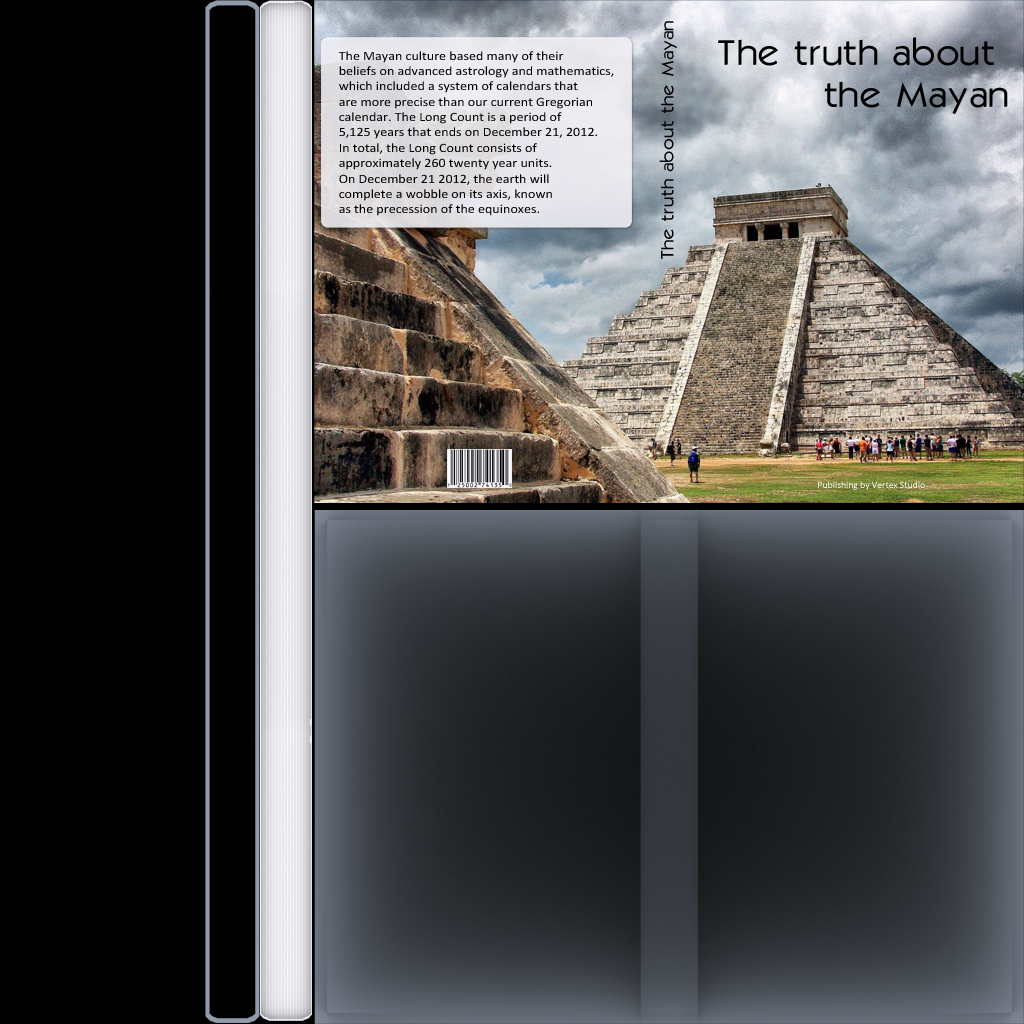
<style>
.page{position:relative;width:1024px;height:1024px;background:#000000}
.page>*{position:absolute;margin:0}
.t1{font:17.7px "Kabel";color:#000000;scale:1.07 1}
.t2{font:35.3px "Kabel";color:#000000;scale:1.07 1}
.t3{font:12.8px "Calibri";color:#000000;scale:1.1 1}
.t4{font:9.7px "Calibri";color:#ffffff}
</style>
<div class="page">
<p class="t1" style="left:659px;top:21px;width:18px;height:238px;rotate:-90deg">The truth about the Mayan</p>
<p class="t2" style="left:718px;top:37px;width:290px;height:77px;text-align:right">The truth about <br>the Mayan</p>
<p class="t3" style="left:338px;top:51px;width:276px;height:165px">The Mayan culture based many of their <br>beliefs on advanced astrology and mathematics, <br>which included a system of calendars that <br>are more precise than our current Gregorian <br>calendar. The Long Count is a period of <br>5,125 years that ends on December 21, 2012. <br>In total, the Long Count consists of <br>approximately 260 twenty year units. <br>On December 21 2012, the earth will <br>complete a wobble on its axis, known <br>as the precession of the equinoxes.</p>
<p class="t4" style="left:818px;top:481px;width:107px;height:9px">Publishing by Vertex Studio</p>
</div>
